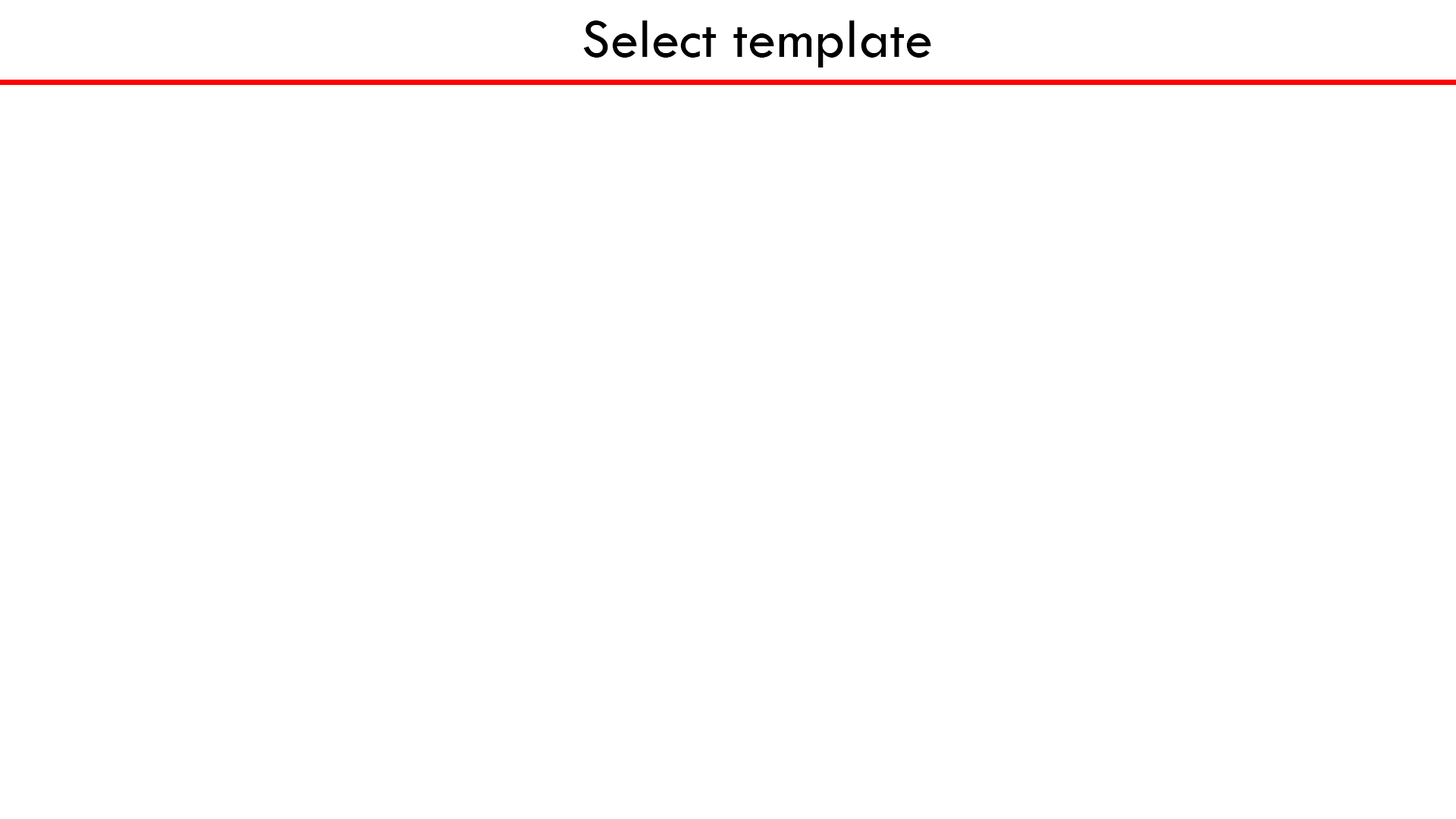
<style>
.page{position:relative;width:1456px;height:819px;background:#ffffff}
.page>*{position:absolute;margin:0}
.t1{font:56.9px "TwCenMT-Regular";color:#000000}
</style>
<div class="page">
<p class="t1" style="left:583px;top:20px;width:348px;height:47px">Select template</p>
</div>
